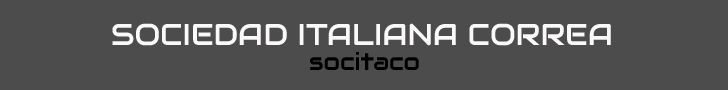
<style>
.page{position:relative;width:728px;height:90px;background:#4c4c4c}
.page>*{position:absolute;margin:0}
.t1{font:30px "Audiowide-Regular";color:#fbf8f8}
.t2{font:24px "Audiowide-Regular";color:#000000}
</style>
<div class="page">
<p class="t1" style="left:112px;top:23px;width:499px;height:23px">SOCIEDAD ITALIANA CORREA</p>
<p class="t2" style="left:310px;top:52px;width:109px;height:18px">socitaco</p>
</div>
